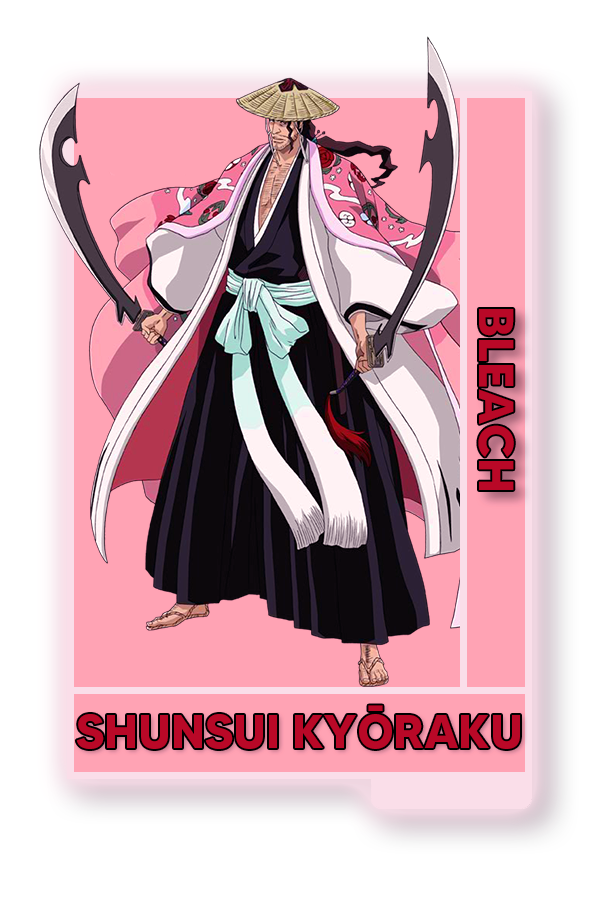
<style>
.page{position:relative;width:600px;height:900px;background:#ffffff}
.page>*{position:absolute;margin:0}
.t1{font:48.8px "MADETOMMY-Bold";color:#a3182d}
.t2{font:47.2px "MADETOMMY-Bold";color:#a3182d}
</style>
<div class="page">
<p class="t1" style="left:478px;top:309px;width:36px;height:181px;rotate:90deg">BLEACH</p>
<p class="t2" style="left:76px;top:705px;width:444px;height:44px">SHUNSUI KYŌRAKU</p>
</div>
